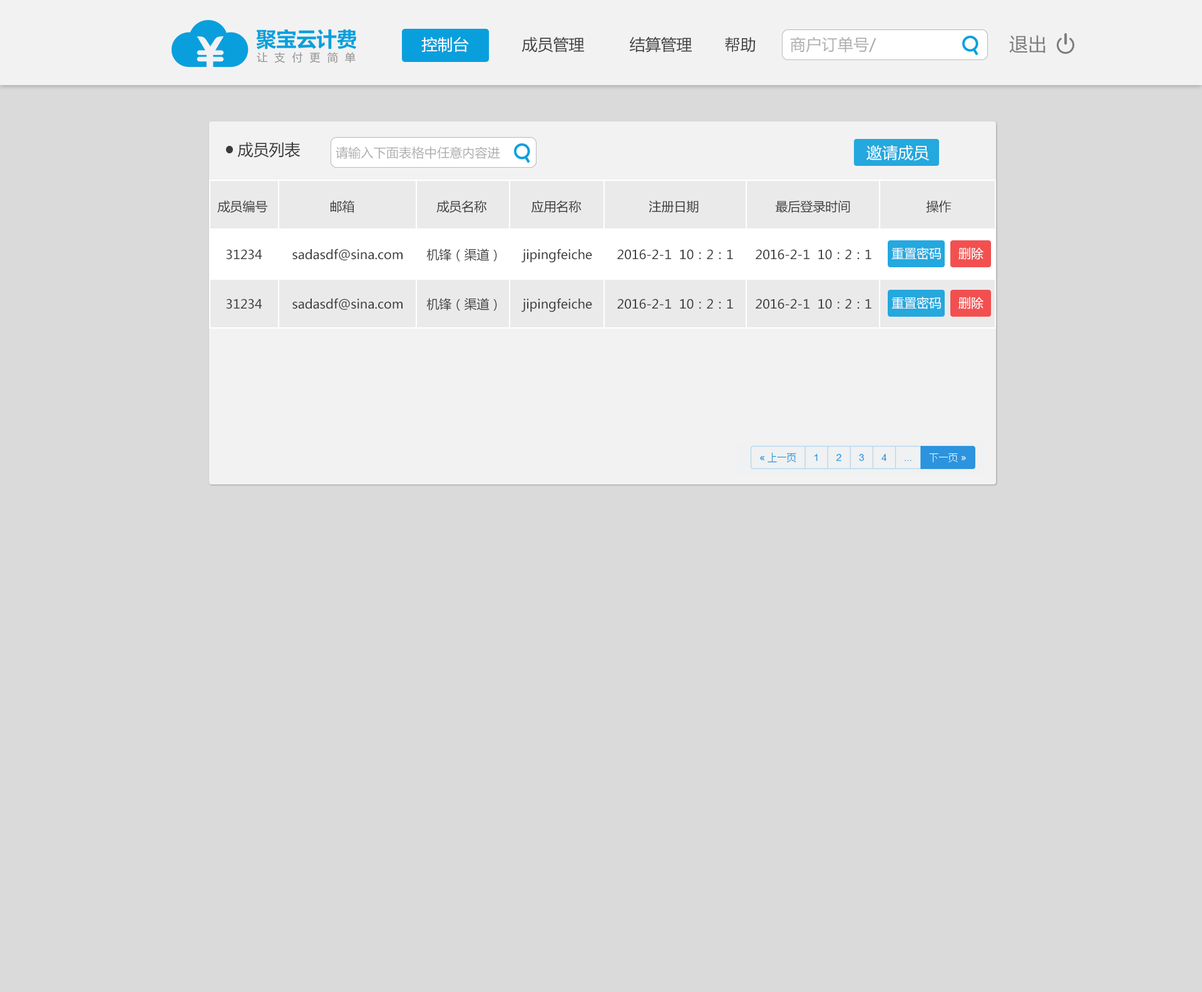
<style>
.page{position:relative;width:1202px;height:992px;background:#dadada}
.page>*{position:absolute;margin:0}
.t1{font:15.6px "MicrosoftYaHei";color:#ffffff}
.t2{font:15.6px "MicrosoftYaHei";color:#3f3f3f}
.t3{font:15.6px "MicrosoftYaHei";color:#aeaeae}
.t4{font:18.8px "MicrosoftYaHei";color:#7d7d7d}
.t5{font:15.6px "MicrosoftYaHei";color:#3a3a3a}
.t6{font:12.5px "MicrosoftYaHei";color:#aeaeae}
.t7{font:12.5px "MicrosoftYaHei";color:#3a3a3a}
.t8{font:12.5px "MicrosoftYaHei";color:#3f3f3f}
.t9{font:12.5px "MicrosoftYaHei";color:#ffffff}
</style>
<div class="page">
<p class="t1" style="left:421px;top:37px;width:48px;height:16px">控制台</p>
<p class="t2" style="left:521px;top:37px;width:63px;height:16px">成员管理</p>
<p class="t2" style="left:629px;top:37px;width:63px;height:16px">结算管理</p>
<p class="t2" style="left:725px;top:37px;width:30px;height:15px">帮助</p>
<p class="t3" style="left:790px;top:37px;width:86px;height:16px">商户订单号/ 聚宝订单号/ 付款方名称</p>
<p class="t4" style="left:1009px;top:35px;width:36px;height:18px">退出</p>
<p class="t5" style="left:237px;top:142px;width:63px;height:16px">成员列表</p>
<p class="t6" style="left:336px;top:146px;width:164px;height:13px">请输入下面表格中任意内容进行搜索</p>
<p class="t1" style="left:866px;top:145px;width:63px;height:16px">邀请成员</p>
<p class="t7" style="left:217px;top:200px;width:51px;height:13px">成员编号</p>
<p class="t7" style="left:331px;top:200px;width:23px;height:13px">邮箱</p>
<p class="t7" style="left:436px;top:200px;width:51px;height:13px">成员名称</p>
<p class="t7" style="left:531px;top:200px;width:51px;height:13px">应用名称</p>
<p class="t7" style="left:649px;top:200px;width:50px;height:13px">注册日期</p>
<p class="t7" style="left:775px;top:200px;width:75px;height:13px">最后登录时间</p>
<p class="t7" style="left:926px;top:200px;width:25px;height:13px">操作</p>
<p class="t8" style="left:226px;top:249px;width:36px;height:11px">31234</p>
<p class="t8" style="left:292px;top:249px;width:110px;height:11px">sadasdf@sina.com</p>
<p class="t8" style="left:426px;top:249px;width:71px;height:13px">机锋（渠道）</p>
<p class="t8" style="left:521px;top:249px;width:71px;height:14px">jipingfeiche</p>
<p class="t8" style="left:617px;top:249px;width:116px;height:11px">2016-2-1  10：2：1</p>
<p class="t8" style="left:756px;top:249px;width:115px;height:11px">2016-2-1  10：2：1</p>
<p class="t9" style="left:891px;top:247px;width:50px;height:13px">重置密码</p>
<p class="t9" style="left:958px;top:247px;width:25px;height:13px">删除</p>
<p class="t8" style="left:226px;top:299px;width:36px;height:10px">31234</p>
<p class="t8" style="left:292px;top:298px;width:110px;height:12px">sadasdf@sina.com</p>
<p class="t8" style="left:426px;top:298px;width:71px;height:13px">机锋（渠道）</p>
<p class="t8" style="left:521px;top:298px;width:71px;height:14px">jipingfeiche</p>
<p class="t8" style="left:617px;top:299px;width:116px;height:10px">2016-2-1  10：2：1</p>
<p class="t8" style="left:756px;top:299px;width:115px;height:10px">2016-2-1  10：2：1</p>
<p class="t9" style="left:891px;top:297px;width:50px;height:12px">重置密码</p>
<p class="t9" style="left:958px;top:297px;width:25px;height:12px">删除</p>
</div>
